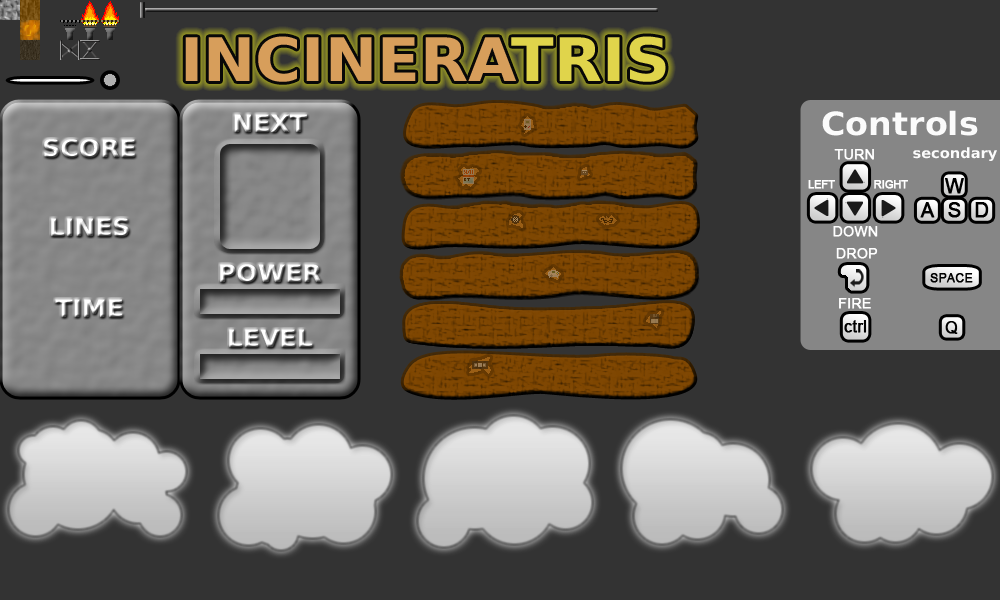
<style>
.page{position:relative;width:1000px;height:600px;background:#333333}
.page>*{position:absolute;margin:0}
.t1{font:60px "DejaVuSansCondensed-Bold";scale:1.16 1}
.t2{font:32px "DejaVuSansCondensed-Bold";color:#ffffff;scale:1.16 1}
.t3{font:24px "DejaVuSansCondensed-Bold";scale:1.16 1}
.t4{font:14px "ArialMT";color:#ffffff;font-weight:bold}
.t5{font:14px "DejaVuSansCondensed-Bold";color:#ffffff;scale:1.16 1}
.t6{font:10.5px "ArialMT";color:#ffffff;font-weight:bold}
.t7{font:20.2px "ArialMT";color:#000000;font-weight:bold}
.t8{font:12.2px "ArialMT";color:#000000;font-weight:bold}
.t9{font:16.2px "ArialMT";color:#000000;font-weight:bold}
</style>
<div class="page">
<p class="t1" style="left:185px;top:36px;width:481px;height:46px">INCINERATRIS</p>
<p class="t2" style="left:822px;top:110px;width:156px;height:26px;opacity:0.97">Controls</p>
<p class="t3" style="left:234px;top:114px;width:73px;height:18px">NEXT</p>
<p class="t3" style="left:44px;top:139px;width:91px;height:19px">SCORE</p>
<p class="t4" style="left:834px;top:149px;width:40px;height:11px">TURN</p>
<p class="t5" style="left:913px;top:147px;width:84px;height:14px;opacity:0.97">secondary</p>
<p class="t6" style="left:808px;top:180px;width:27px;height:9px">LEFT</p>
<p class="t6" style="left:874px;top:180px;width:34px;height:9px">RIGHT</p>
<p class="t7" style="left:945px;top:178px;width:19px;height:16px">W</p>
<p class="t7" style="left:920px;top:202px;width:15px;height:16px">A</p>
<p class="t7" style="left:948px;top:202px;width:13px;height:16px">S</p>
<p class="t7" style="left:975px;top:202px;width:14px;height:16px">D</p>
<p class="t3" style="left:51px;top:218px;width:78px;height:19px">LINES</p>
<p class="t4" style="left:833px;top:226px;width:45px;height:11px">DOWN</p>
<p class="t4" style="left:836px;top:248px;width:42px;height:11px">DROP</p>
<p class="t3" style="left:220px;top:264px;width:102px;height:19px">POWER</p>
<p class="t8" style="left:930px;top:273px;width:43px;height:10px">SPACE</p>
<p class="t3" style="left:55px;top:299px;width:68px;height:18px">TIME</p>
<p class="t4" style="left:839px;top:298px;width:32px;height:11px">FIRE</p>
<p class="t3" style="left:229px;top:329px;width:84px;height:18px">LEVEL</p>
<p class="t9" style="left:844px;top:320px;width:23px;height:13px">ctrl</p>
<p class="t9" style="left:945px;top:321px;width:13px;height:13px">Q</p>
</div>
